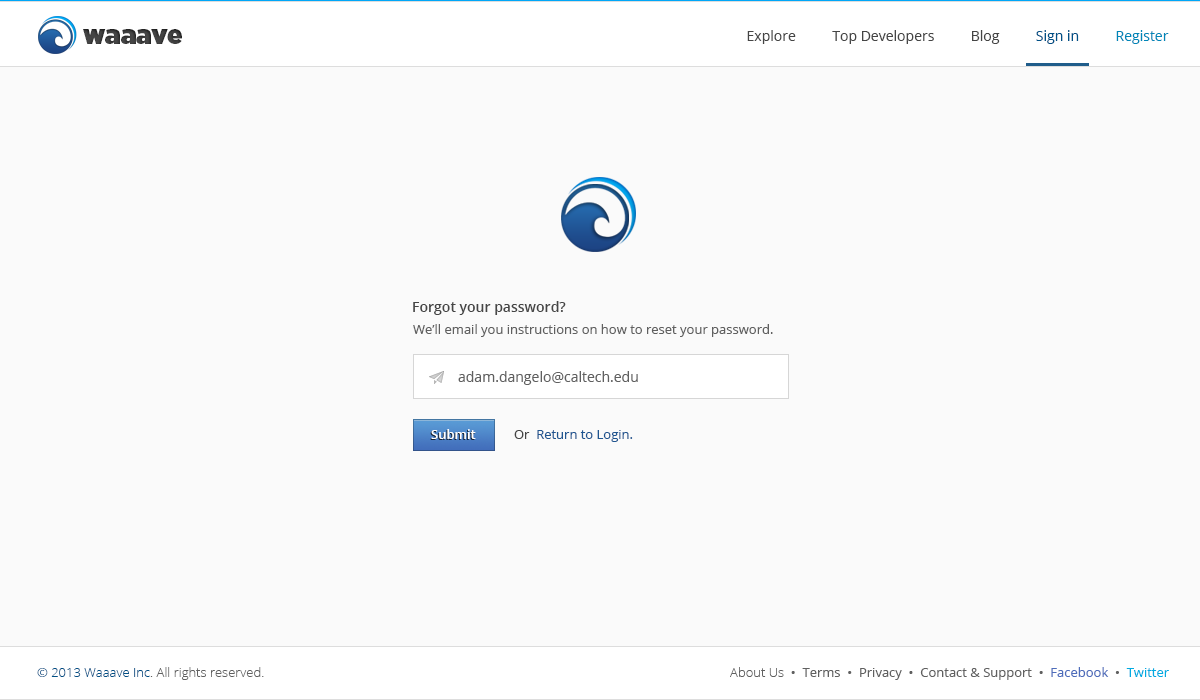
<style>
.page{position:relative;width:1200px;height:700px;background:#fafafa}
.page>*{position:absolute;margin:0}
.t1{font:25.9px "Gotham-Ultra";color:#454545}
.t2{font:14px "OpenSans";color:#454545}
.t3{font:14px "OpenSans";color:#005086}
.t4{font:14px "OpenSans";color:#0086b8}
.t5{font:14px "OpenSans-Semibold";color:#454545}
.t6{font:13px "OpenSans";color:#606060}
.t7{font:14px "OpenSans";color:#606060}
.t8{font:13px "OpenSans-Semibold";color:#ffffff}
.t9{font:13px "OpenSans";color:#1f5691}
.t10{font:13px "OpenSans";color:#454545}
.t11{font:13px "OpenSans-Light";color:#606060}
.t12{font:13px "OpenSans-Light";color:#005086}
.t13{font:13px "OpenSans";color:#4e6dbb}
.t14{font:13px "OpenSans";color:#01abe1}
</style>
<div class="page">
<p class="t1" style="left:83px;top:29px;width:99px;height:15px">waaave</p>
<p class="t2" style="left:747px;top:30px;width:422px;height:14px">Explore          Top Developers          Blog          <span class="t3">Sign in          </span><span class="t4">Register</span></p>
<p class="t5" style="left:413px;top:301px;width:153px;height:14px">Forgot your password?</p>
<p class="t6" style="left:413px;top:324px;width:360px;height:13px">We’ll email you instructions on how to reset your password.</p>
<p class="t7" style="left:458px;top:371px;width:180px;height:14px">adam.dangelo@caltech.edu</p>
<p class="t8" style="left:431px;top:429px;width:45px;height:10px">Submit</p>
<p class="t9" style="left:514px;top:430px;width:119px;height:12px"><span class="t10">Or  </span>Return to Login.</p>
<p class="t11" style="left:37px;top:667px;width:227px;height:13px"><span class="t12">© 2013 Waaave Inc</span>. All rights reserved.</p>
<p class="t6" style="left:730px;top:667px;width:439px;height:13px"><span class="t11">About Us  </span>•  Terms  •  Privacy  •  Contact &amp; Support  •  <span class="t13">Facebook</span>  •  <span class="t14">Twitter</span></p>
</div>
